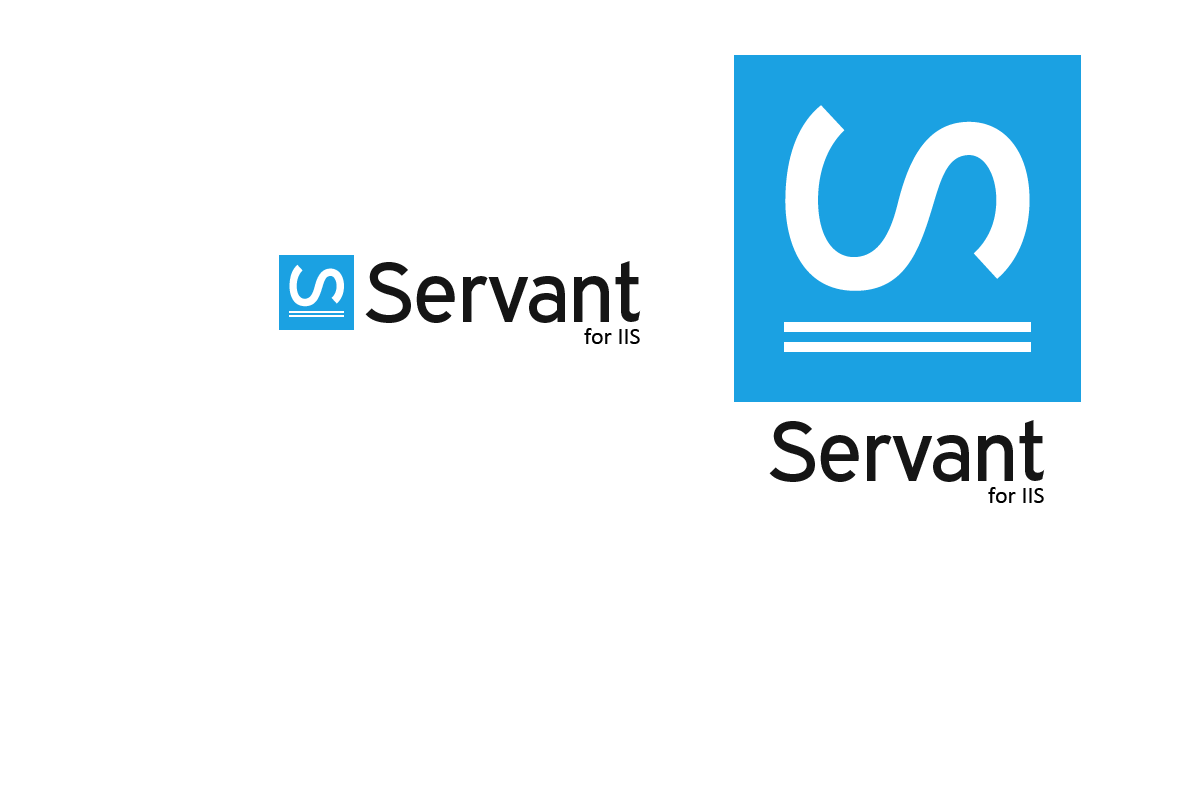
<style>
.page{position:relative;width:1200px;height:800px;background:#ffffff}
.page>*{position:absolute;margin:0}
.t1{font:345px "ExpresswayRg-Regular";letter-spacing:-0.025em;color:#ffffff}
.t2{font:77px "ExpresswayRg-Regular";letter-spacing:-0.025em;color:#ffffff}
.t3{font:85px "ExpresswayRg-Regular";letter-spacing:-0.025em;color:#151515}
.t4{font:24px "Calibri";color:#000000}
</style>
<div class="page">
<p class="t1" style="left:785px;top:105px;width:245px;height:186px;rotate:90deg">S</p>
<p class="t2" style="left:289px;top:264px;width:55px;height:43px;rotate:90deg">S</p>
<p class="t3" style="left:365px;top:261px;width:276px;height:62px">Servant</p>
<p class="t4" style="left:584px;top:328px;width:56px;height:16px">for IIS</p>
<p class="t3" style="left:769px;top:420px;width:276px;height:62px">Servant</p>
<p class="t4" style="left:988px;top:487px;width:56px;height:16px">for IIS</p>
</div>
